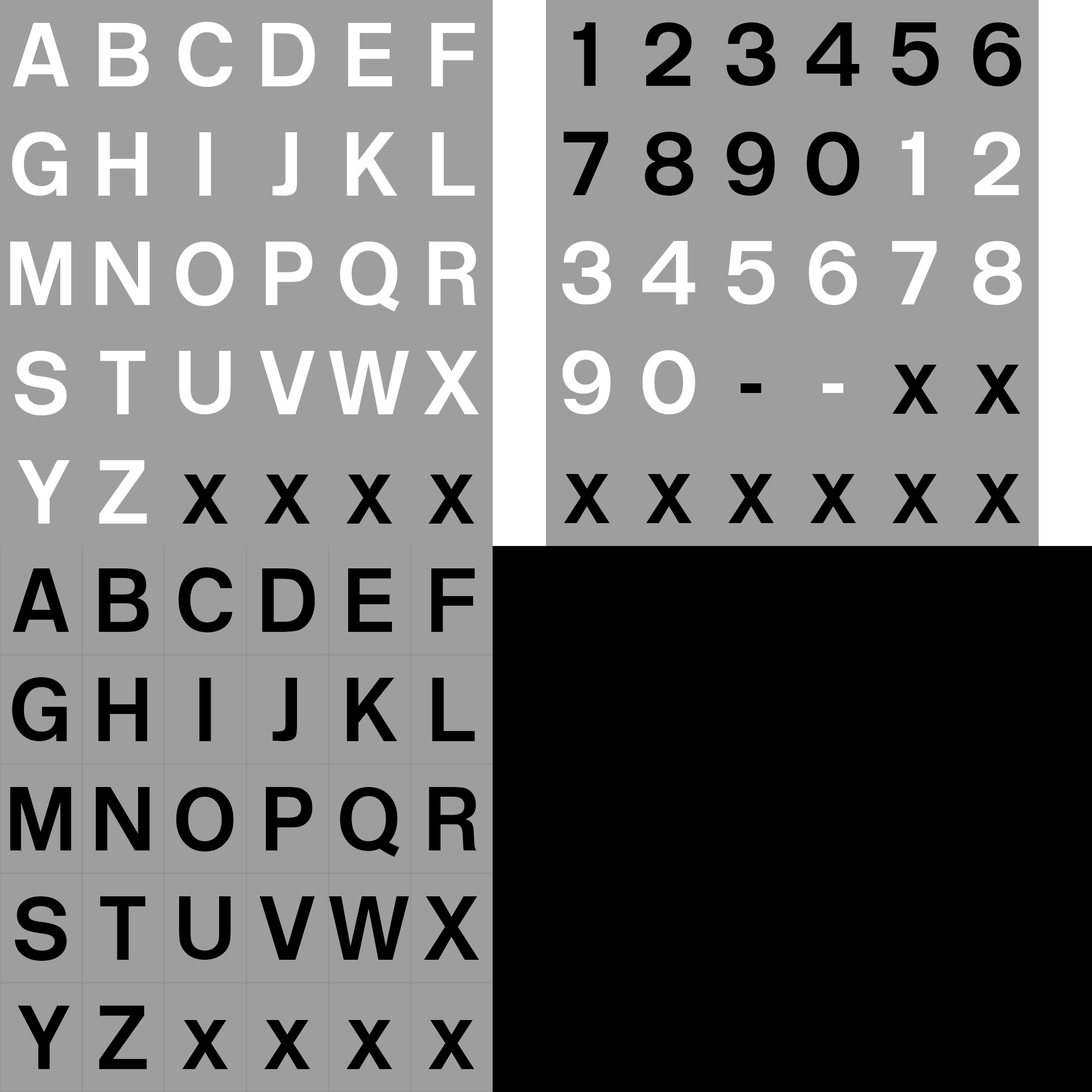
<style>
.page{position:relative;width:1092px;height:1092px;background:#9e9e9e}
.page>*{position:absolute;margin:0}
.t1{font:96px "BritishRailLightNormal";color:#ffffff}
.t2{font:96px "BritishRailLightNormal";color:#000000}
</style>
<div class="page">
<p class="t1" style="left:13px;top:23px;width:56px;height:63px">A</p>
<p class="t1" style="left:99px;top:23px;width:50px;height:63px">B</p>
<p class="t1" style="left:178px;top:22px;width:54px;height:65px">C</p>
<p class="t1" style="left:262px;top:23px;width:53px;height:63px">D</p>
<p class="t1" style="left:348px;top:23px;width:44px;height:63px">E</p>
<p class="t1" style="left:431px;top:23px;width:44px;height:63px">F</p>
<p class="t2" style="left:573px;top:22px;width:23px;height:64px">1</p>
<p class="t2" style="left:645px;top:22px;width:47px;height:64px">2</p>
<p class="t2" style="left:726px;top:22px;width:49px;height:64px">3</p>
<p class="t2" style="left:806px;top:22px;width:54px;height:64px">4</p>
<p class="t2" style="left:892px;top:22px;width:47px;height:64px">5</p>
<p class="t2" style="left:973px;top:22px;width:49px;height:64px">6</p>
<p class="t1" style="left:12px;top:132px;width:55px;height:64px">G</p>
<p class="t1" style="left:98px;top:132px;width:49px;height:64px">H</p>
<p class="t1" style="left:199px;top:132px;width:12px;height:64px">I</p>
<p class="t1" style="left:272px;top:132px;width:25px;height:64px">J</p>
<p class="t1" style="left:347px;top:132px;width:50px;height:64px">K</p>
<p class="t1" style="left:432px;top:132px;width:43px;height:64px">L</p>
<p class="t2" style="left:564px;top:132px;width:44px;height:63px">7</p>
<p class="t2" style="left:645px;top:132px;width:49px;height:64px">8</p>
<p class="t2" style="left:727px;top:132px;width:48px;height:64px">9</p>
<p class="t2" style="left:807px;top:132px;width:53px;height:64px">0</p>
<p class="t1" style="left:902px;top:132px;width:22px;height:63px">1</p>
<p class="t1" style="left:974px;top:132px;width:46px;height:63px">2</p>
<p class="t1" style="left:10px;top:242px;width:61px;height:63px">M</p>
<p class="t1" style="left:95px;top:242px;width:55px;height:63px">N</p>
<p class="t1" style="left:176px;top:242px;width:58px;height:64px">O</p>
<p class="t1" style="left:266px;top:242px;width:46px;height:63px">P</p>
<p class="t1" style="left:340px;top:242px;width:59px;height:69px">Q</p>
<p class="t1" style="left:429px;top:242px;width:48px;height:63px">R</p>
<p class="t1" style="left:562px;top:241px;width:49px;height:63px">3</p>
<p class="t1" style="left:642px;top:241px;width:53px;height:63px">4</p>
<p class="t1" style="left:728px;top:241px;width:47px;height:63px">5</p>
<p class="t1" style="left:809px;top:241px;width:48px;height:64px">6</p>
<p class="t1" style="left:892px;top:241px;width:45px;height:63px">7</p>
<p class="t1" style="left:973px;top:241px;width:49px;height:64px">8</p>
<p class="t1" style="left:14px;top:351px;width:53px;height:64px">S</p>
<p class="t1" style="left:100px;top:351px;width:46px;height:63px">T</p>
<p class="t1" style="left:179px;top:351px;width:52px;height:63px">U</p>
<p class="t1" style="left:259px;top:351px;width:56px;height:63px">V</p>
<p class="t1" style="left:329px;top:351px;width:80px;height:63px">W</p>
<p class="t1" style="left:424px;top:351px;width:55px;height:63px">X</p>
<p class="t1" style="left:563px;top:350px;width:48px;height:64px">9</p>
<p class="t1" style="left:643px;top:350px;width:52px;height:64px">0</p>
<p class="t2" style="left:892px;top:365px;width:46px;height:49px">x</p>
<p class="t2" style="left:974px;top:365px;width:47px;height:49px">x</p>
<p class="t2" style="left:741px;top:383px;width:20px;height:10px">-</p>
<p class="t1" style="left:823px;top:383px;width:21px;height:10px">-</p>
<p class="t1" style="left:18px;top:460px;width:52px;height:64px">Y</p>
<p class="t1" style="left:99px;top:460px;width:48px;height:64px">Z</p>
<p class="t2" style="left:182px;top:475px;width:46px;height:49px">x</p>
<p class="t2" style="left:264px;top:475px;width:46px;height:49px">x</p>
<p class="t2" style="left:346px;top:475px;width:46px;height:49px">x</p>
<p class="t2" style="left:428px;top:475px;width:47px;height:49px">x</p>
<p class="t2" style="left:564px;top:474px;width:46px;height:49px">x</p>
<p class="t2" style="left:646px;top:474px;width:46px;height:49px">x</p>
<p class="t2" style="left:728px;top:474px;width:46px;height:49px">x</p>
<p class="t2" style="left:810px;top:474px;width:46px;height:49px">x</p>
<p class="t2" style="left:892px;top:474px;width:46px;height:49px">x</p>
<p class="t2" style="left:974px;top:474px;width:47px;height:49px">x</p>
<p class="t2" style="left:13px;top:568px;width:56px;height:64px">A</p>
<p class="t2" style="left:99px;top:568px;width:50px;height:64px">B</p>
<p class="t2" style="left:178px;top:567px;width:54px;height:65px">C</p>
<p class="t2" style="left:262px;top:568px;width:53px;height:64px">D</p>
<p class="t2" style="left:348px;top:568px;width:44px;height:64px">E</p>
<p class="t2" style="left:431px;top:568px;width:44px;height:64px">F</p>
<p class="t2" style="left:12px;top:677px;width:55px;height:64px">G</p>
<p class="t2" style="left:98px;top:678px;width:49px;height:63px">H</p>
<p class="t2" style="left:199px;top:678px;width:12px;height:63px">I</p>
<p class="t2" style="left:272px;top:678px;width:25px;height:63px">J</p>
<p class="t2" style="left:347px;top:678px;width:50px;height:63px">K</p>
<p class="t2" style="left:432px;top:678px;width:43px;height:63px">L</p>
<p class="t2" style="left:10px;top:787px;width:61px;height:63px">M</p>
<p class="t2" style="left:95px;top:787px;width:55px;height:63px">N</p>
<p class="t2" style="left:176px;top:787px;width:58px;height:65px">O</p>
<p class="t2" style="left:266px;top:787px;width:46px;height:63px">P</p>
<p class="t2" style="left:340px;top:787px;width:59px;height:70px">Q</p>
<p class="t2" style="left:429px;top:787px;width:48px;height:63px">R</p>
<p class="t2" style="left:14px;top:896px;width:53px;height:65px">S</p>
<p class="t2" style="left:100px;top:896px;width:46px;height:64px">T</p>
<p class="t2" style="left:179px;top:896px;width:52px;height:64px">U</p>
<p class="t2" style="left:259px;top:896px;width:56px;height:64px">V</p>
<p class="t2" style="left:329px;top:896px;width:80px;height:64px">W</p>
<p class="t2" style="left:424px;top:896px;width:55px;height:64px">X</p>
<p class="t2" style="left:18px;top:1006px;width:52px;height:63px">Y</p>
<p class="t2" style="left:99px;top:1006px;width:48px;height:63px">Z</p>
<p class="t2" style="left:182px;top:1020px;width:46px;height:49px">x</p>
<p class="t2" style="left:264px;top:1020px;width:46px;height:49px">x</p>
<p class="t2" style="left:346px;top:1020px;width:46px;height:49px">x</p>
<p class="t2" style="left:428px;top:1020px;width:47px;height:49px">x</p>
</div>
